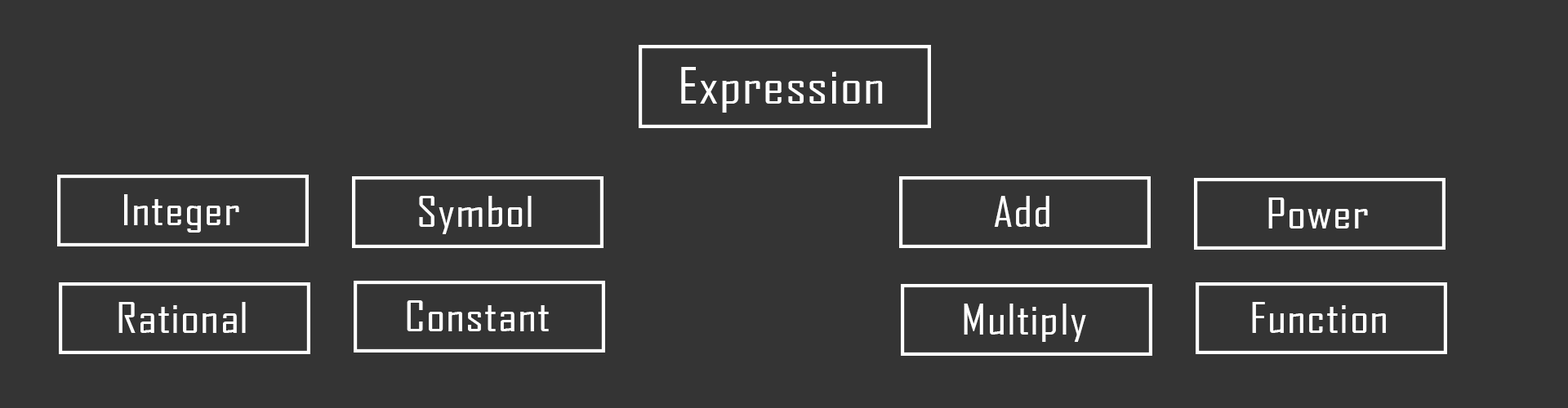
<style>
.page{position:relative;width:1568px;height:408px;background:#343434}
.page>*{position:absolute;margin:0}
.t1{font:47.9px "AgencyFB-Reg";letter-spacing:0.02em;color:#ffffff;scale:1.2 1}
.t2{font:41.1px "AgencyFB-Reg";letter-spacing:0.02em;color:#ffffff;scale:1.2 1}
</style>
<div class="page">
<p class="t1" style="left:681px;top:67px;width:202px;height:46px">Expression</p>
<p class="t2" style="left:124px;top:194px;width:115px;height:39px">Integer</p>
<p class="t2" style="left:419px;top:196px;width:113px;height:38px">Symbol</p>
<p class="t2" style="left:994px;top:196px;width:55px;height:31px">Add</p>
<p class="t2" style="left:1268px;top:198px;width:100px;height:31px">Power</p>
<p class="t2" style="left:118px;top:302px;width:128px;height:31px">Rational</p>
<p class="t2" style="left:407px;top:301px;width:142px;height:31px">Constant</p>
<p class="t2" style="left:964px;top:304px;width:122px;height:38px">Multiply</p>
<p class="t2" style="left:1252px;top:302px;width:134px;height:31px">Function</p>
</div>
